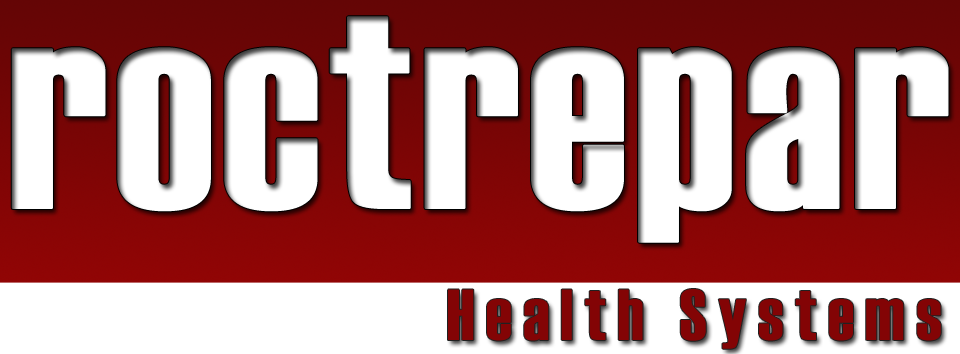
<style>
.page{position:relative;width:960px;height:354px;background:#ffffff}
.page>*{position:absolute;margin:0}
.t1{font:280px "Haettenschweiler";color:#ffffff;font-weight:bold}
.t2{font:280px "Haettenschweiler";letter-spacing:-0.04em;color:#ffffff;font-weight:bold}
.t3{font:72px "Haettenschweiler";letter-spacing:0.16em;color:#830405}
</style>
<div class="page">
<p class="t1" style="left:11px;top:16px;width:938px;height:227px">roctrepa<span class="t2">r</span></p>
<p class="t3" style="left:448px;top:289px;width:493px;height:60px">Health Systems</p>
</div>
